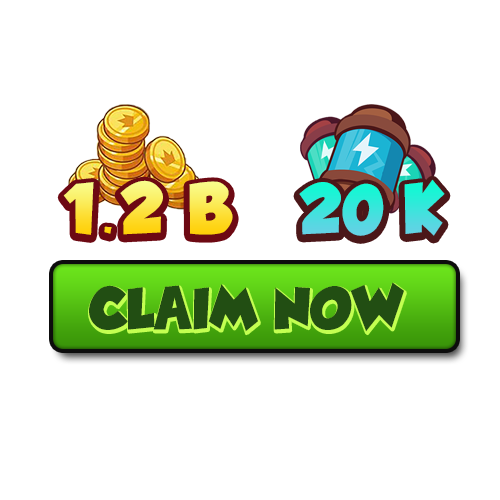
<style>
.page{position:relative;width:500px;height:500px;background:#ffffff}
.page>*{position:absolute;margin:0}
.t1{font:62.6px "TadeoFont-Bold";letter-spacing:0.09em}
.t2{font:78.2px "TadeoFont-Bold";letter-spacing:0.21em}
.t3{font:61.2px "TadeoFont-Bold";letter-spacing:0.01em}
.t4{font:76.5px "TadeoFont-Bold";letter-spacing:0.21em}
.t5{font:62.5px "TadeoFont-Bold";letter-spacing:0.01em;color:#224e13}
</style>
<div class="page">
<p class="t1" style="left:63px;top:180px;width:170px;height:55px">1.2 <span class="t2">B</span></p>
<p class="t3" style="left:299px;top:179px;width:146px;height:57px">20 <span class="t4">K</span></p>
<p class="t5" style="left:89px;top:282px;width:315px;height:50px">CLAIM NOW</p>
</div>
